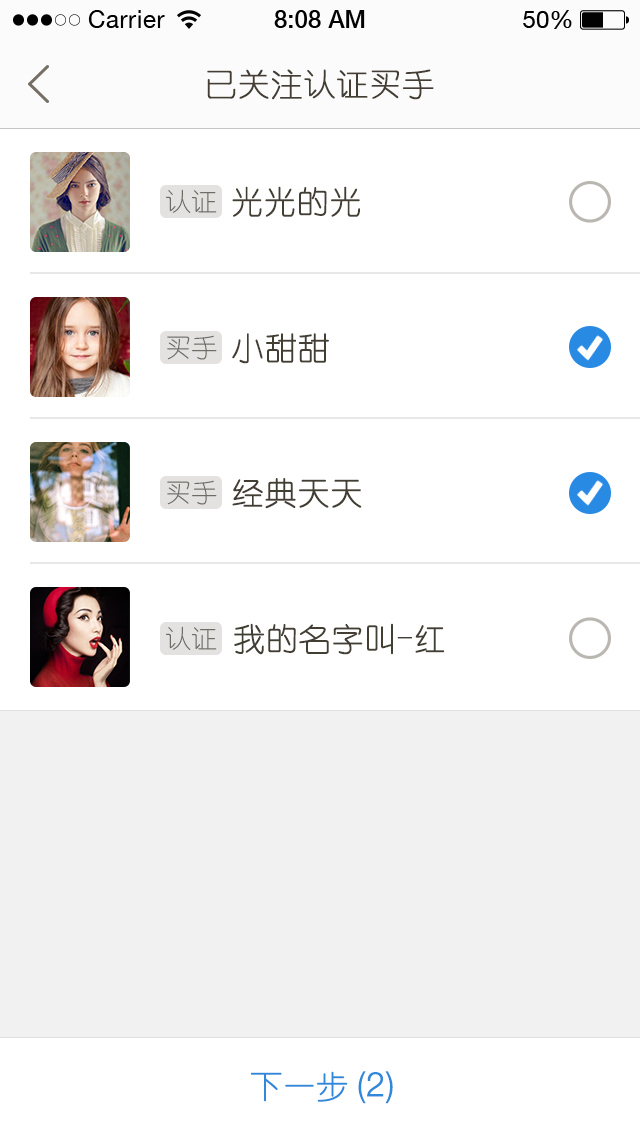
<style>
.page{position:relative;width:640px;height:1136px;background:#ffffff}
.page>*{position:absolute;margin:0}
.t1{font:32px "YouYuan";color:#433d33;text-transform:uppercase;font-weight:bold}
.t2{font:26px "YouYuan";color:#6f6b65;text-transform:uppercase}
.t3{font:32px "YouYuan";color:#433e34;text-transform:uppercase;font-weight:bold}
.t4{font:32px "YouYuan";color:#2f88da;text-transform:uppercase;font-weight:bold}
.t5{font:34px "HelveticaNeueLTPro-Lt";color:#2f88da;text-transform:uppercase;font-weight:bold}
</style>
<div class="page">
<p class="t1" style="left:207px;top:69px;width:227px;height:31px">已关注认证买手</p>
<p class="t2" style="left:166px;top:189px;width:51px;height:24px">认证</p>
<p class="t3" style="left:232px;top:186px;width:128px;height:31px">光光的光</p>
<p class="t2" style="left:167px;top:335px;width:50px;height:25px">买手</p>
<p class="t3" style="left:232px;top:333px;width:97px;height:31px">小甜甜</p>
<p class="t2" style="left:167px;top:480px;width:50px;height:25px">买手</p>
<p class="t3" style="left:232px;top:478px;width:130px;height:31px">经典天天</p>
<p class="t2" style="left:166px;top:626px;width:51px;height:24px">认证</p>
<p class="t3" style="left:234px;top:623px;width:211px;height:32px">我的名字叫-红</p>
<p class="t4" style="left:250px;top:1071px;width:98px;height:31px">下一步</p>
<p class="t5" style="left:358px;top:1071px;width:35px;height:33px">(2)</p>
</div>
